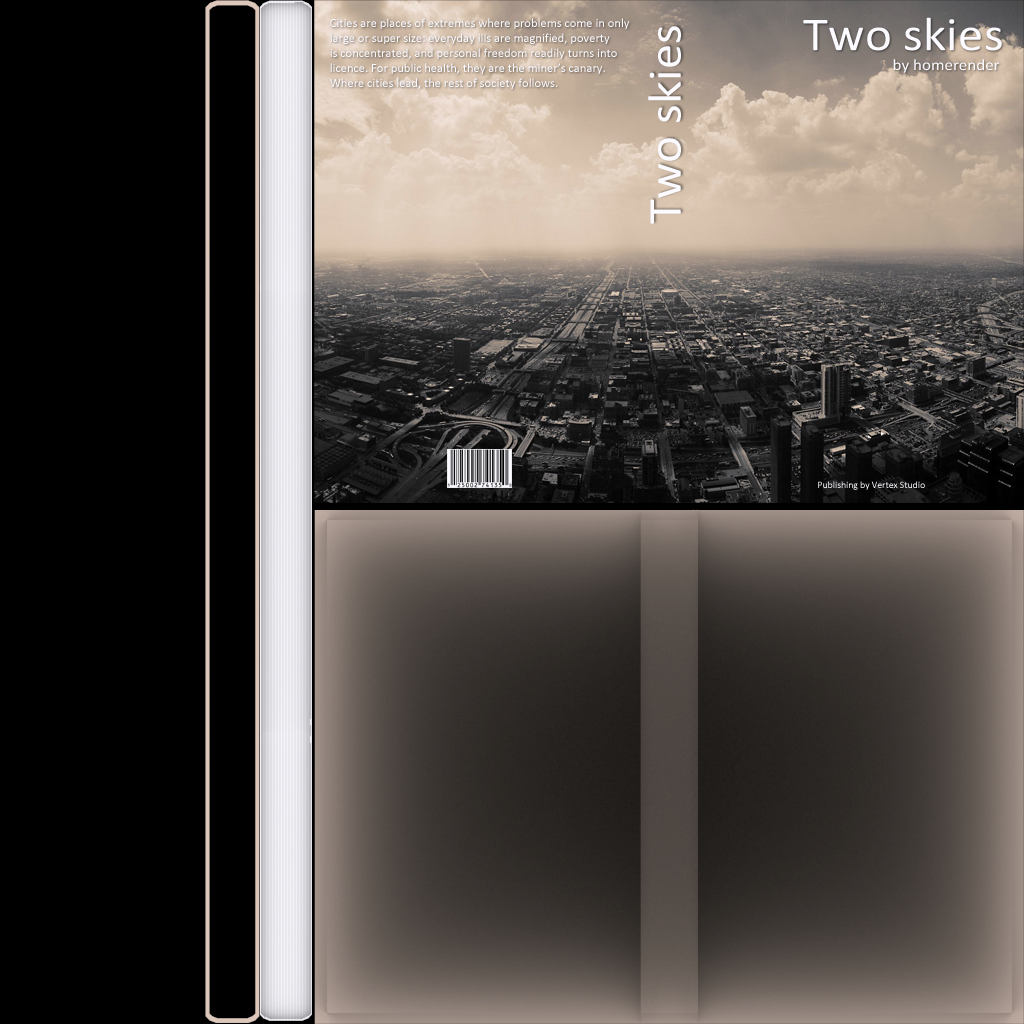
<style>
.page{position:relative;width:1024px;height:1024px;background:#000000}
.page>*{position:absolute;margin:0}
.t1{font:47.6px "Calibri";color:#ffffff;scale:1.07 1}
.t2{font:12.5px "Calibri";color:#ffffff}
.t3{font:15.8px "Calibri";color:#ffffff;scale:1.07 1}
.t4{font:9.7px "Calibri";color:#ffffff}
</style>
<div class="page">
<p class="t1" style="left:803px;top:17px;width:199px;height:34px">Two skies</p>
<p class="t2" style="left:330px;top:18px;width:300px;height:71px">Cities are places of extremes where problems come in only <br>large or super size: everyday ills are magnified, poverty <br>is concentrated, and personal freedom readily turns into <br>licence. For public health, they are the miner’s canary. <br>Where cities lead, the rest of society follows.</p>
<p class="t1" style="left:648px;top:26px;width:33px;height:198px;rotate:-90deg">Two skies</p>
<p class="t3" style="left:893px;top:59px;width:107px;height:14px">by homerender</p>
<p class="t4" style="left:818px;top:481px;width:107px;height:9px">Publishing by Vertex Studio</p>
</div>
